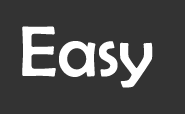
<style>
.page{position:relative;width:185px;height:114px;background:#333333}
.page>*{position:absolute;margin:0}
.t1{font:72px "BerlinSansFB-Reg";color:#ffffff}
</style>
<div class="page">
<p class="t1" style="left:22px;top:26px;width:131px;height:62px">Easy</p>
</div>
